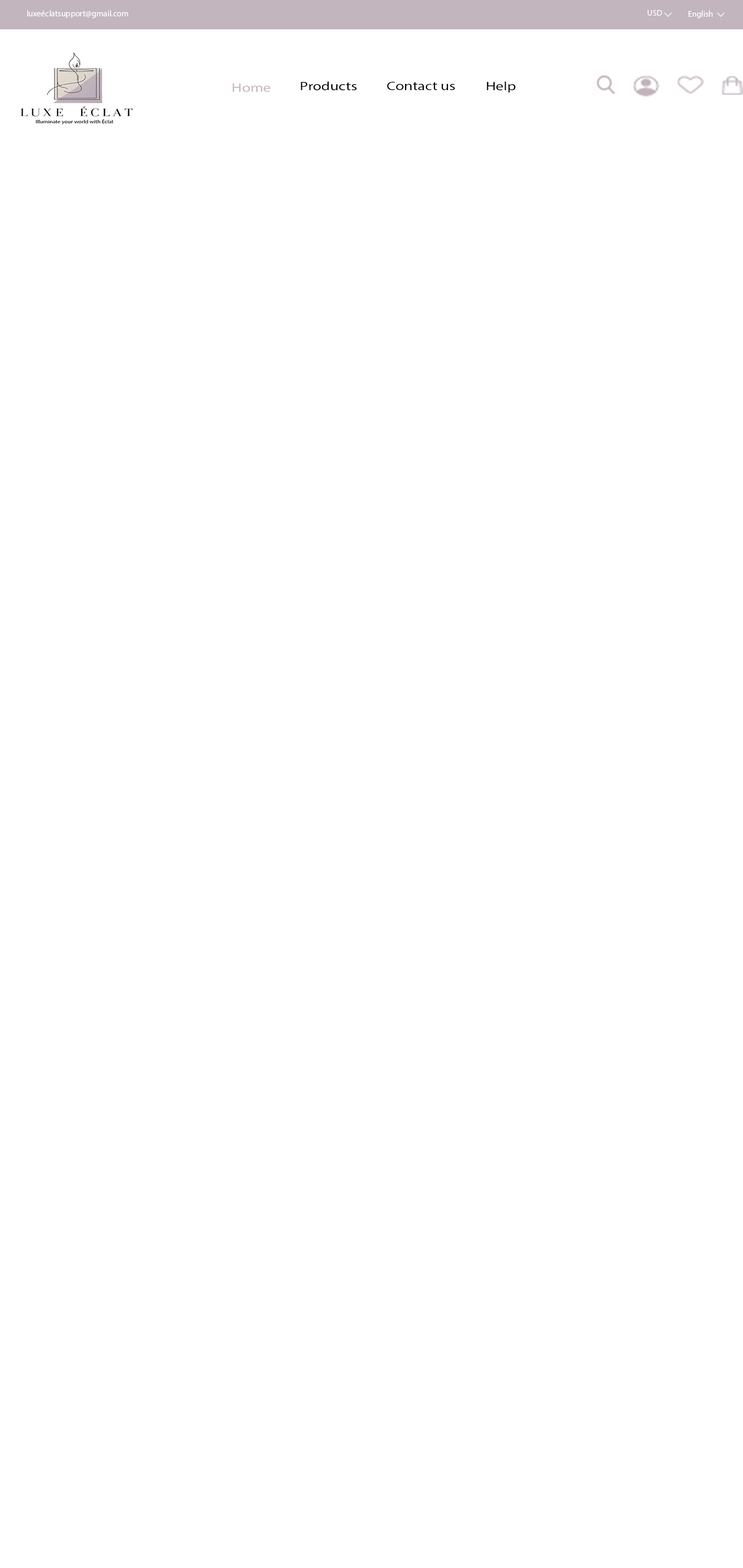
<style>
.page{position:relative;width:743px;height:1568px;background:#ffffff}
.page>*{position:absolute;margin:0}
.t1{font:8.4px "MyriadPro-Regular";color:#fefefe}
.t2{font:8.4px "MyriadPro-Regular";color:#ffffff}
.t3{font:12.2px "MyriadPro-Regular";color:#c2b5be;scale:1.27 1}
.t4{font:12.2px "MyriadPro-Regular";color:#000000;scale:1.27 1}
</style>
<div class="page">
<p class="t1" style="left:27px;top:10px;width:101px;height:8px">luxeéclatsupport@gmail.com</p>
<p class="t2" style="left:648px;top:10px;width:14px;height:6px">USD</p>
<p class="t2" style="left:689px;top:10px;width:24px;height:8px">English</p>
<p class="t3" style="left:233px;top:83px;width:37px;height:9px">Home</p>
<p class="t4" style="left:301px;top:81px;width:56px;height:10px">Products</p>
<p class="t4" style="left:387px;top:82px;width:68px;height:8px">Contact us</p>
<p class="t4" style="left:487px;top:81px;width:29px;height:12px">Help</p>
</div>
